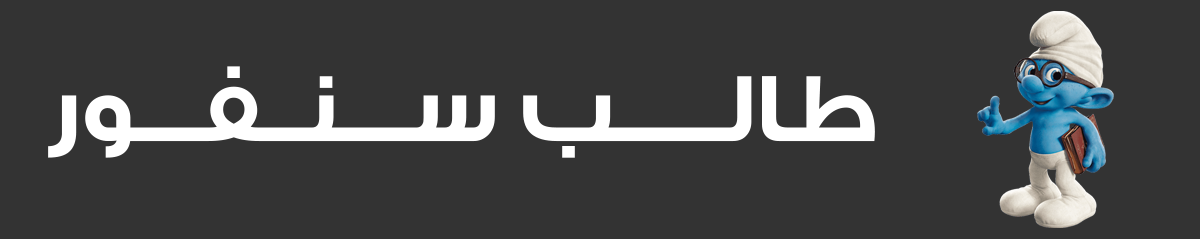
<style>
.page{position:relative;width:1200px;height:239px;background:#333333}
.page>*{position:absolute;margin:0}
.t1{font:100.5px "GESSTwoBold-Bold";color:#ffffff}
</style>
<div class="page">
<p class="t1" style="left:48px;top:66px;width:827px;height:92px">طالـــــب ســـنــفـــور</p>
</div>
